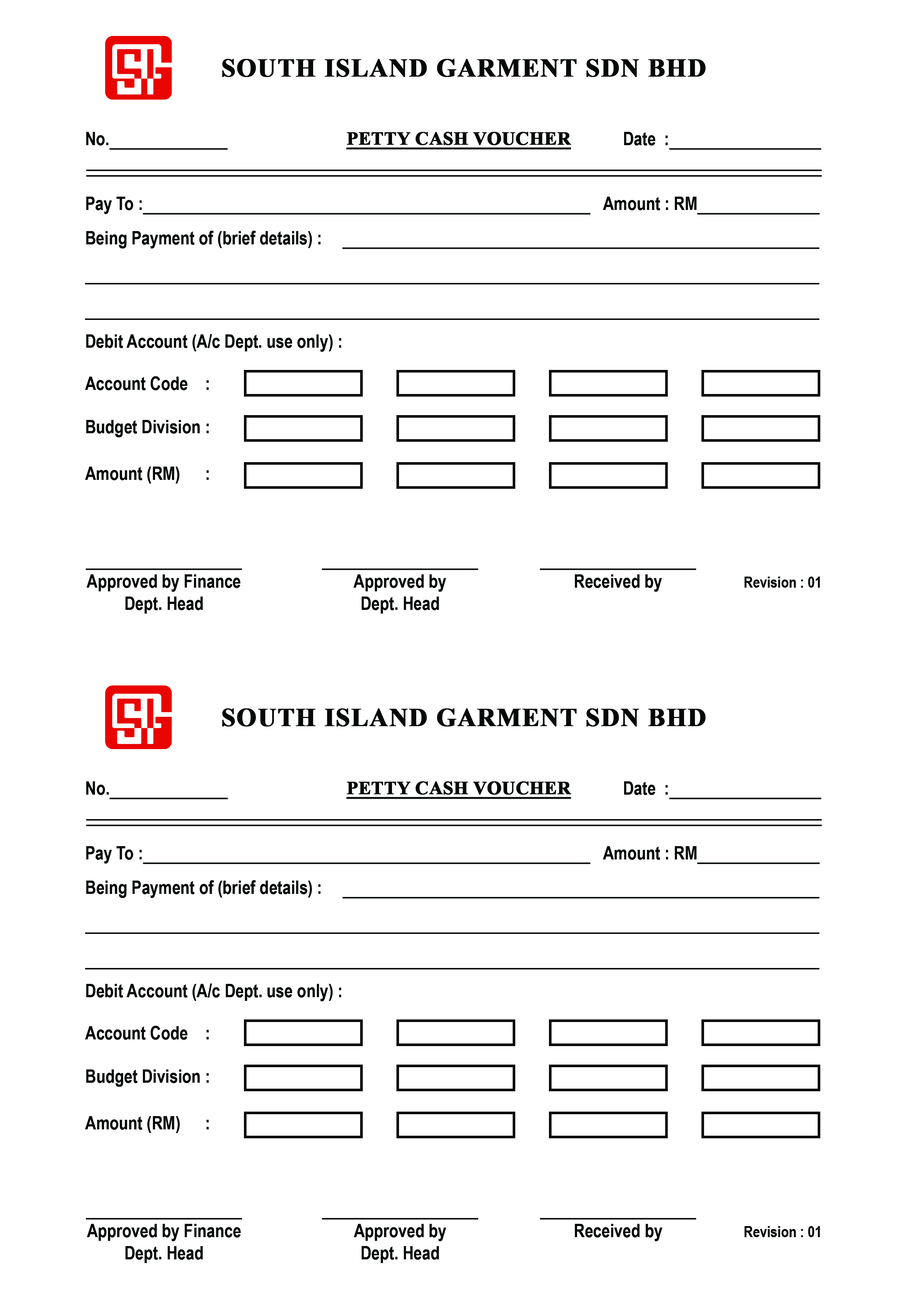
<style>
.page{position:relative;width:918px;height:1299px;background:#ffffff}
.page>*{position:absolute;margin:0}
.t1{font:25.5px "TimesNewRomanPS-BoldMT";letter-spacing:0.025em;color:#060808;font-weight:bold}
.t2{font:18.5px "ArialNarrow-Bold";color:#060808}
.t3{font:18.5px "TimesNewRomanPS-BoldMT";color:#060808;font-weight:bold;text-decoration:underline}
.t4{font:18.5px/35.5px "ArialNarrow-Bold";color:#060808}
.t5{font:18.5px "ArialNarrow-Bold";color:#060808;text-decoration:underline}
.t6{font:15.4px "ArialNarrow-Bold";color:#060808}
</style>
<div class="page">
<p class="t1" style="left:222px;top:59px;width:484px;height:18px">SOUTH ISLAND GARMENT SDN BHD</p>
<p class="t2" style="left:86px;top:132px;width:142px;height:18px">No.</p>
<p class="t3" style="left:346px;top:132px;width:225px;height:18px">PETTY CASH VOUCHER</p>
<p class="t2" style="left:624px;top:132px;width:198px;height:18px">Date  :</p>
<p class="t2" style="left:86px;top:197px;width:505px;height:18px">Pay To :</p>
<p class="t2" style="left:603px;top:197px;width:217px;height:18px">Amount : RM</p>
<p class="t4" style="left:85px;top:231px;width:735px;height:89px">Being Payment of (brief details) :</p>
<p class="t2" style="left:86px;top:334px;width:255px;height:18px">Debit Account (A/c Dept. use only) :</p>
<p class="t2" style="left:85px;top:376px;width:124px;height:14px">Account Code  :</p>
<p class="t2" style="left:86px;top:420px;width:123px;height:17px">Budget Division :</p>
<p class="t2" style="left:85px;top:466px;width:124px;height:18px">Amount (RM)  :</p>
<p class="t2" style="left:86px;top:568px;width:156px;height:45px;text-align:center"><span class="t5">                                     <br></span>Approved by Finance<br>Dept. Head</p>
<p class="t2" style="left:322px;top:568px;width:156px;height:45px;text-align:center"><span class="t5">                                     <br></span>Approved by<br>Dept. Head</p>
<p class="t2" style="left:540px;top:568px;width:156px;height:24px"><span class="t5">                                     <br></span>Received by</p>
<p class="t6" style="left:745px;top:576px;width:75px;height:12px">Revision : 01</p>
<p class="t1" style="left:222px;top:708px;width:484px;height:18px">SOUTH ISLAND GARMENT SDN BHD</p>
<p class="t2" style="left:86px;top:781px;width:142px;height:18px">No.</p>
<p class="t3" style="left:346px;top:781px;width:225px;height:18px">PETTY CASH VOUCHER</p>
<p class="t2" style="left:624px;top:781px;width:198px;height:18px">Date  :</p>
<p class="t2" style="left:86px;top:846px;width:505px;height:18px">Pay To :</p>
<p class="t2" style="left:603px;top:846px;width:217px;height:18px">Amount : RM</p>
<p class="t4" style="left:85px;top:880px;width:735px;height:89px">Being Payment of (brief details) :</p>
<p class="t2" style="left:86px;top:983px;width:255px;height:18px">Debit Account (A/c Dept. use only) :</p>
<p class="t2" style="left:85px;top:1026px;width:124px;height:14px">Account Code  :</p>
<p class="t2" style="left:86px;top:1069px;width:123px;height:18px">Budget Division :</p>
<p class="t2" style="left:85px;top:1116px;width:124px;height:17px">Amount (RM)  :</p>
<p class="t2" style="left:86px;top:1218px;width:156px;height:45px;text-align:center"><span class="t5">                                     <br></span>Approved by Finance<br>Dept. Head</p>
<p class="t2" style="left:322px;top:1218px;width:156px;height:45px;text-align:center"><span class="t5">                                     <br></span>Approved by<br>Dept. Head</p>
<p class="t2" style="left:540px;top:1218px;width:156px;height:23px"><span class="t5">                                     <br></span>Received by</p>
<p class="t6" style="left:745px;top:1226px;width:75px;height:11px">Revision : 01</p>
</div>
